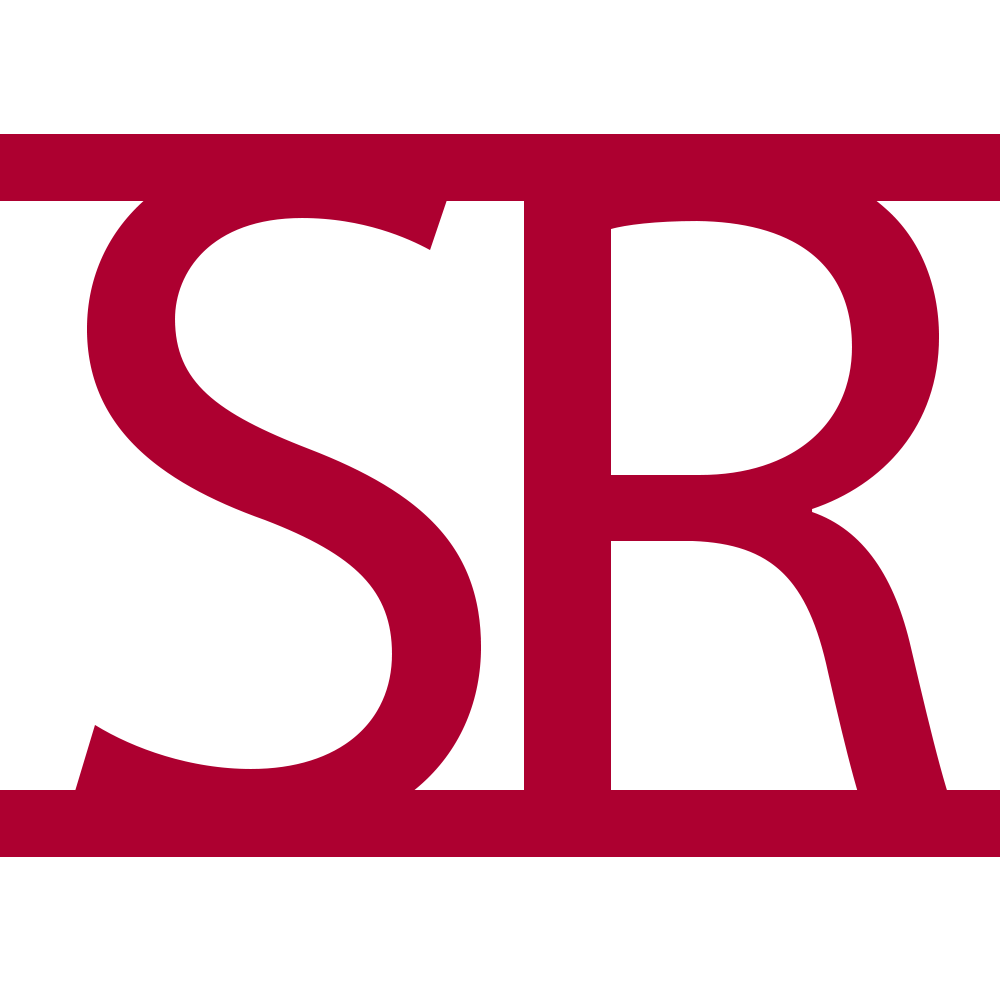
<style>
.page{position:relative;width:1000px;height:1000px;background:#ffffff}
.page>*{position:absolute;margin:0}
.t1{font:1000px "MyriadPro-Regular";color:#ad0030}
</style>
<div class="page">
<p class="t1" style="left:73px;top:146px;width:408px;height:695px">S</p>
<p class="t1" style="left:524px;top:154px;width:439px;height:679px">R</p>
</div>
